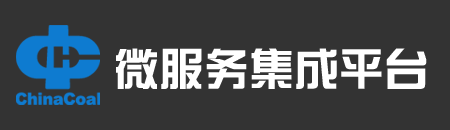
<style>
.page{position:relative;width:450px;height:130px;background:#333333}
.page>*{position:absolute;margin:0}
.t1{font:45px "DFZongYi-Bd-80-Win-GB";color:#ffffff}
</style>
<div class="page">
<p class="t1" style="left:116px;top:48px;width:311px;height:41px">微服务集成平台</p>
</div>
